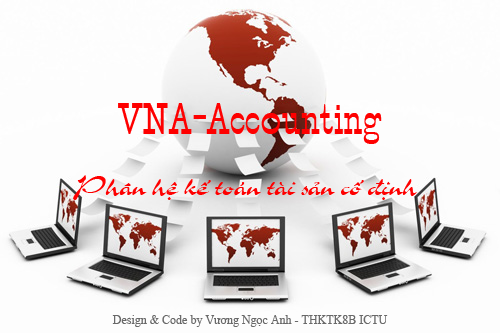
<style>
.page{position:relative;width:500px;height:333px;background:#fdfdfd}
.page>*{position:absolute;margin:0}
.t1{font:30px "VN-StageCoach-Regular";color:#fe0000}
.t2{font:30px "VNI-Slogan";color:#fe0000}
.t3{font:12px "TimesNewRomanPSMT";color:#696969}
</style>
<div class="page">
<p class="t1" style="left:118px;top:103px;width:264px;height:41px">VNA-Accounting</p>
<p class="t2" style="left:73px;top:175px;width:345px;height:25px">Phaân heä keá toaùn taøi saûn coá ñònh</p>
<p class="t3" style="left:112px;top:315px;width:276px;height:12px">Design &amp; Code by Vương Ngọc Anh - THKTK8B ICTU</p>
</div>
